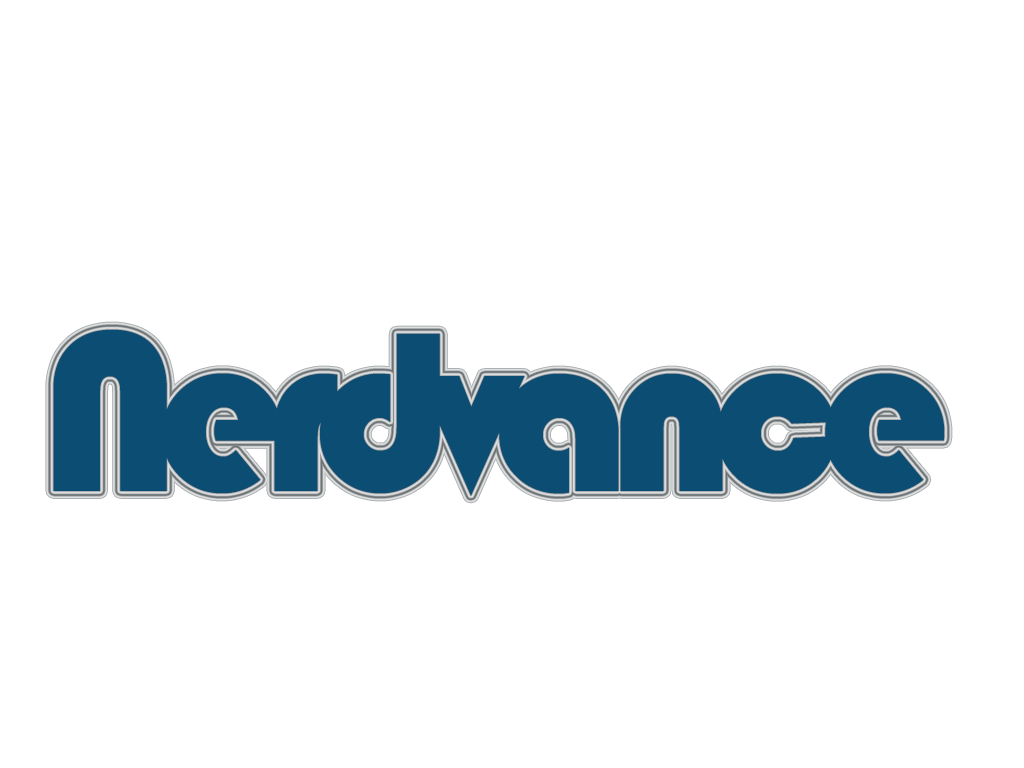
<style>
.page{position:relative;width:1024px;height:768px;background:#ffffff}
.page>*{position:absolute;margin:0}
.t1{font:236px "Bauhaus93";letter-spacing:-0.1em;color:#0b4d73}
</style>
<div class="page">
<p class="t1" style="left:53px;top:329px;width:892px;height:167px">Nerdvance</p>
</div>
